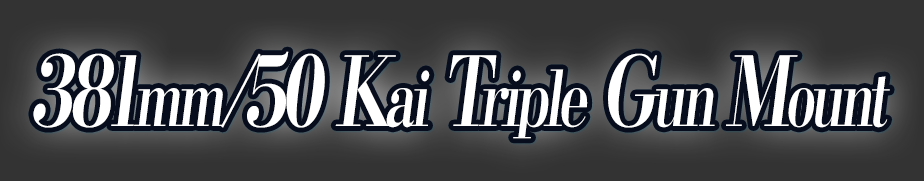
<style>
.page{position:relative;width:924px;height:181px;background:#333333}
.page>*{position:absolute;margin:0}
.t1{font:96px "KochoStd-Heavy";letter-spacing:-0.08em;color:#ffffff;font-style:italic;scale:0.72 1}
.t2{font:76.8px "KochoStd-Heavy";letter-spacing:-0.08em;color:#ffffff;font-style:italic;scale:0.72 1}
</style>
<div class="page">
<p class="t1" style="left:33px;top:51px;width:857px;height:88px">381<span class="t2">mm</span>/50 K<span class="t2">ai</span> T<span class="t2">riple</span> G<span class="t2">un </span>M<span class="t2">ount</span></p>
</div>
